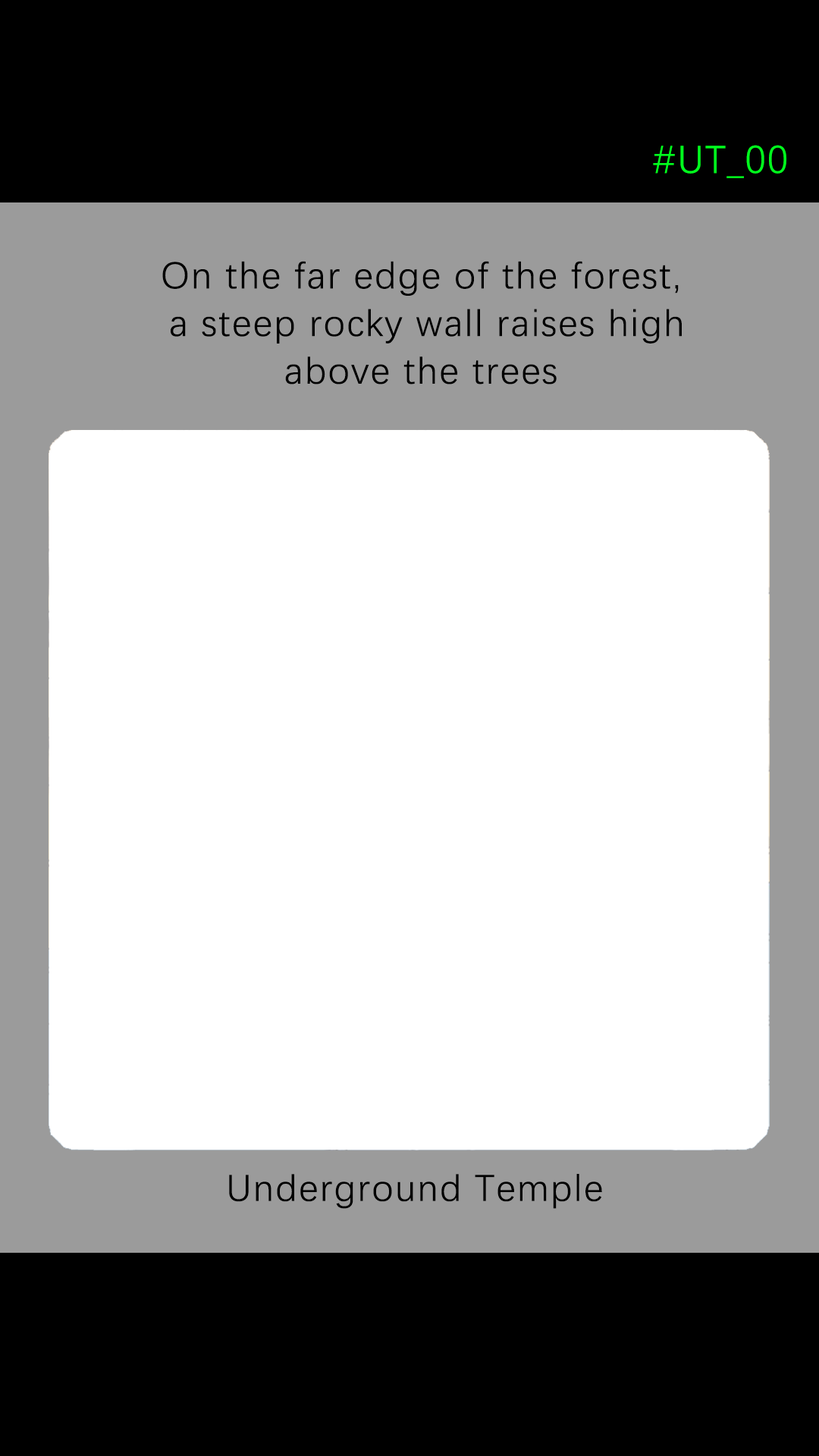
<style>
.page{position:relative;width:819px;height:1456px;background:#ffffff}
.page>*{position:absolute;margin:0}
.t1{font:39.2px "DengXian-Regular";letter-spacing:0.04em;color:#00ff1e}
.t2{font:37.9px/47.6px "DengXian-Regular";letter-spacing:0.04em;color:#000000}
.t3{font:37.9px "DengXian-Regular";letter-spacing:0.04em;color:#000000}
</style>
<div class="page">
<p class="t1" style="left:653px;top:145px;width:133px;height:33px">#UT_00</p>
<p class="t2" style="left:162px;top:261px;width:520px;height:123px;text-align:center">On the far edge of the forest,<br> a steep rocky wall raises high<br>above the trees</p>
<p class="t3" style="left:229px;top:1174px;width:373px;height:35px">Underground Temple</p>
</div>
